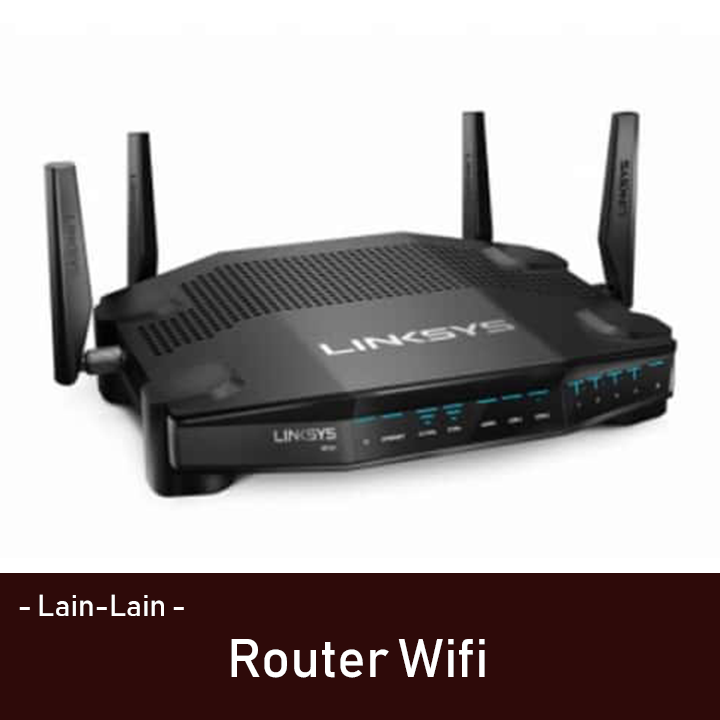
<style>
.page{position:relative;width:720px;height:720px;background:#fdfdfd}
.page>*{position:absolute;margin:0}
.t1{font:30px "Bahnschrift";color:#ffffff}
.t2{font:53.6px "Bahnschrift";color:#ffffff}
</style>
<div class="page">
<p class="t1" style="left:19px;top:594px;width:165px;height:22px">- Lain-Lain -</p>
<p class="t2" style="left:231px;top:639px;width:254px;height:39px">Router Wifi</p>
</div>
